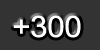
<style>
.page{position:relative;width:100px;height:50px;background:#333333}
.page>*{position:absolute;margin:0}
.t1{font:29.6px "ArialMT";letter-spacing:-0.015em;color:#ffffff;scale:1.07 1}
</style>
<div class="page">
<p class="t1" style="left:13px;top:15px;width:68px;height:23px">+300</p>
</div>
